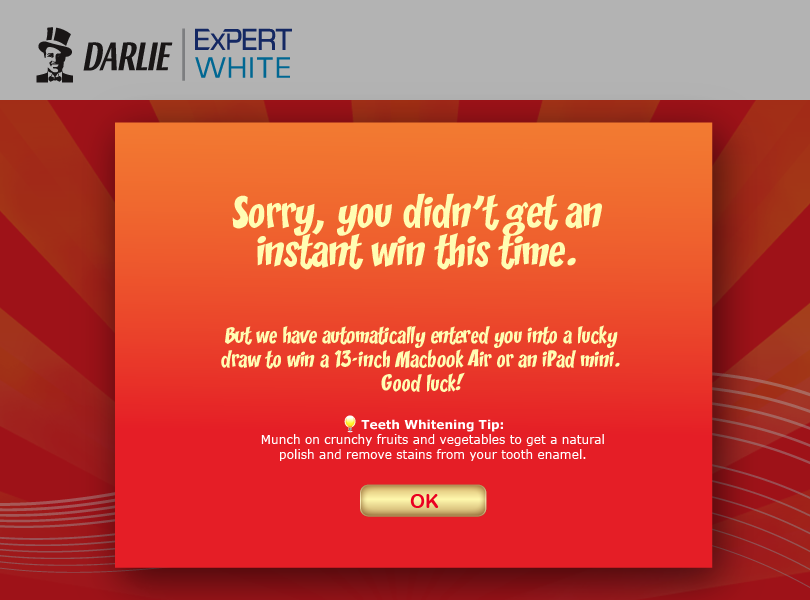
<style>
.page{position:relative;width:810px;height:600px}
.page>*{position:absolute;margin:0}
.t1{font:39px/39px "CCZoinks";color:#fffdb3}
.t2{font:20px "CCZoinks";color:#fffdb3}
.t3{font:12.2px "Verdana";color:#ffffff}
.t4{font:12.2px "Verdana-Bold";color:#ffffff}
.t5{font:19px "ArialRoundedMTBold";color:#ea0022}
</style>
<div class="page">
<p class="t1" style="left:232px;top:193px;width:370px;height:77px;text-align:center">Sorry, you didn’t get an instant win this time.</p>
<p class="t2" style="left:221px;top:325px;width:399px;height:67px;text-align:center">But we have automatically entered you into a lucky draw to win a 13-inch Macbook Air or an iPad mini. Good luck!</p>
<p class="t3" style="left:261px;top:419px;width:343px;height:42px;text-align:center"><span class="t4">Teeth Whitening Tip:<br></span>Munch on crunchy fruits and vegetables to get a natural polish and remove stains from your tooth enamel.</p>
<p class="t5" style="left:410px;top:494px;width:29px;height:14px">OK</p>
</div>
